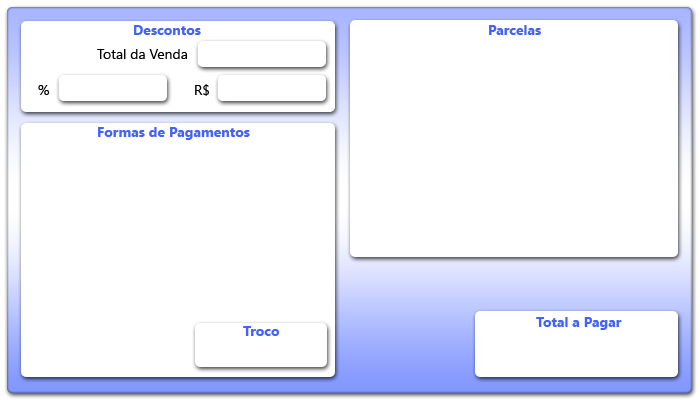
<style>
.page{position:relative;width:700px;height:400px;background:#ffffff}
.page>*{position:absolute;margin:0}
.t1{font:14px "SegoeUI-Bold";color:#4261ff}
.t2{font:14px "SegoeUI";color:#000000}
</style>
<div class="page">
<p class="t1" style="left:134px;top:25px;width:67px;height:10px">Descontos</p>
<p class="t1" style="left:489px;top:25px;width:52px;height:10px">Parcelas</p>
<p class="t2" style="left:97px;top:49px;width:90px;height:10px">Total da Venda</p>
<p class="t2" style="left:38px;top:85px;width:12px;height:10px">%</p>
<p class="t2" style="left:195px;top:84px;width:14px;height:12px">R$</p>
<p class="t1" style="left:98px;top:127px;width:152px;height:13px">Formas de Pagamentos</p>
<p class="t1" style="left:536px;top:317px;width:86px;height:13px">Total a Pagar</p>
<p class="t1" style="left:243px;top:326px;width:37px;height:10px">Troco</p>
</div>
